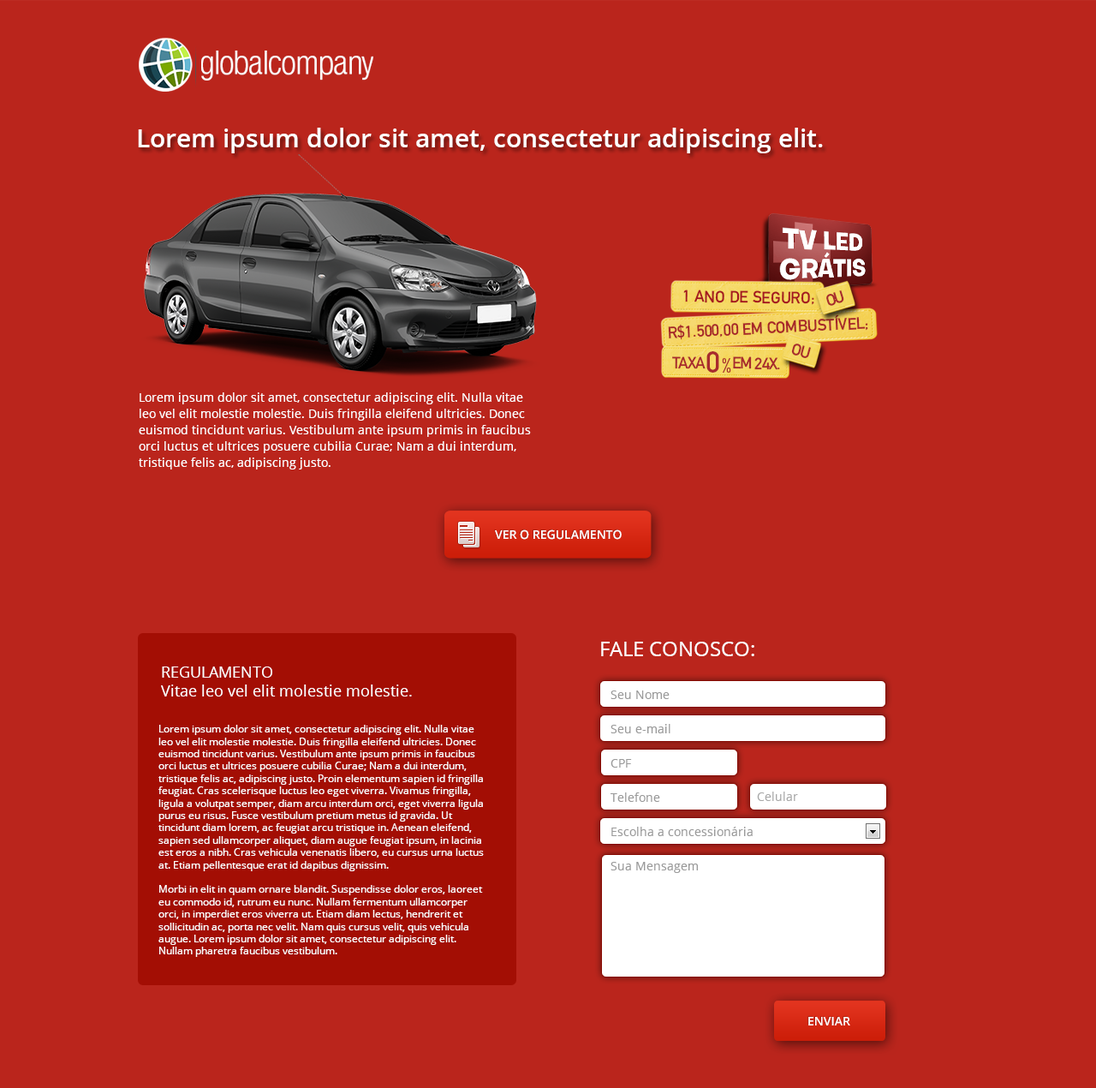
<style>
.page{position:relative;width:1096px;height:1088px;background:#ba251c}
.page>*{position:absolute;margin:0}
.t1{font:33.7px "HelveticaNeueLTStd-LtCn";letter-spacing:-0.01em;color:#ffffff}
.t2{font:25.7px "OpenSans-Semibold";color:#ffffff}
.t3{font:12px/16.3px "OpenSans";color:#ffffff}
.t4{font:12px "OpenSans-Semibold";color:#ffffff}
.t5{font:20.6px "OpenSans";color:#ffffff}
.t6{font:15.4px "OpenSans";color:#ffffff}
.t7{font:10.3px "OpenSans";color:#ffffff}
.t8{font:12px "OpenSans";color:#a9a9a9}
</style>
<div class="page">
<p class="t1" style="left:201px;top:51px;width:172px;height:30px">globalcompany</p>
<p class="t2" style="left:138px;top:128px;width:685px;height:25px">Lorem ipsum dolor sit amet, consectetur adipiscing elit.</p>
<p class="t3" style="left:139px;top:392px;width:392px;height:77px">Lorem ipsum dolor sit amet, consectetur adipiscing elit. Nulla vitae leo vel elit molestie molestie. Duis fringilla eleifend ultricies. Donec euismod tincidunt varius. Vestibulum ante ipsum primis in faucibus orci luctus et ultrices posuere cubilia Curae; Nam a dui interdum, tristique felis ac, adipiscing justo.</p>
<p class="t4" style="left:495px;top:529px;width:127px;height:11px">VER O REGULAMENTO</p>
<p class="t5" style="left:601px;top:641px;width:154px;height:15px">FALE CONOSCO:</p>
<p class="t6" style="left:161px;top:666px;width:251px;height:30px">REGULAMENTO<br>Vitae leo vel elit molestie molestie.</p>
<p class="t7" style="left:158px;top:725px;width:326px;height:232px">Lorem ipsum dolor sit amet, consectetur adipiscing elit. Nulla vitae leo vel elit molestie molestie. Duis fringilla eleifend ultricies. Donec euismod tincidunt varius. Vestibulum ante ipsum primis in faucibus orci luctus et ultrices posuere cubilia Curae; Nam a dui interdum, tristique felis ac, adipiscing justo. Proin elementum sapien id fringilla feugiat. Cras scelerisque luctus leo eget viverra. Vivamus fringilla, ligula a volutpat semper, diam arcu interdum orci, eget viverra ligula purus eu risus. Fusce vestibulum pretium metus id gravida. Ut tincidunt diam lorem, ac feugiat arcu tristique in. Aenean eleifend, sapien sed ullamcorper aliquet, diam augue feugiat ipsum, in lacinia est eros a nibh. Cras vehicula venenatis libero, eu cursus urna luctus at. Etiam pellentesque erat id dapibus dignissim.<br><br>Morbi in elit in quam ornare blandit. Suspendisse dolor eros, laoreet eu commodo id, rutrum eu nunc. Nullam fermentum ullamcorper orci, in imperdiet eros viverra ut. Etiam diam lectus, hendrerit et sollicitudin ac, porta nec velit. Nam quis cursus velit, quis vehicula augue. Lorem ipsum dolor sit amet, consectetur adipiscing elit. Nullam pharetra faucibus vestibulum.<br><br>Integer eu venenatis diam, sed aliquet nibh. Nulla elit mi, porttitor ac euismod sit amet, elementum non ipsum. Vestibulum a lectus vel ante rutrum interdum eu quis eros. Fusce nec ante mauris. Cras adipiscing velit vitae gravida pulvinar. Quisque aliquam lacus mauris, vel pellentesque diam ultricies a. Vivamus sem ligula, blandit vel ligula accumsan, gravida tincidunt dolor. Proin eget diam augue. Integer cursus turpis ac enim aliquam pellentesque. Phasellus sit amet felis odio. Morbi a gravida risus. Suspendisse leo massa, vulputate non condimentum ac, imperdiet in ante. Morbi mattis augue magna, nec mattis ipsum sodales ac. Duis malesuada rutrum lacus nec interdum. Maecenas eget interdum purus.</p>
<p class="t8" style="left:757px;top:791px;width:41px;height:10px">Celular</p>
<p class="t4" style="left:809px;top:1017px;width:41px;height:8px">ENVIAR</p>
</div>
